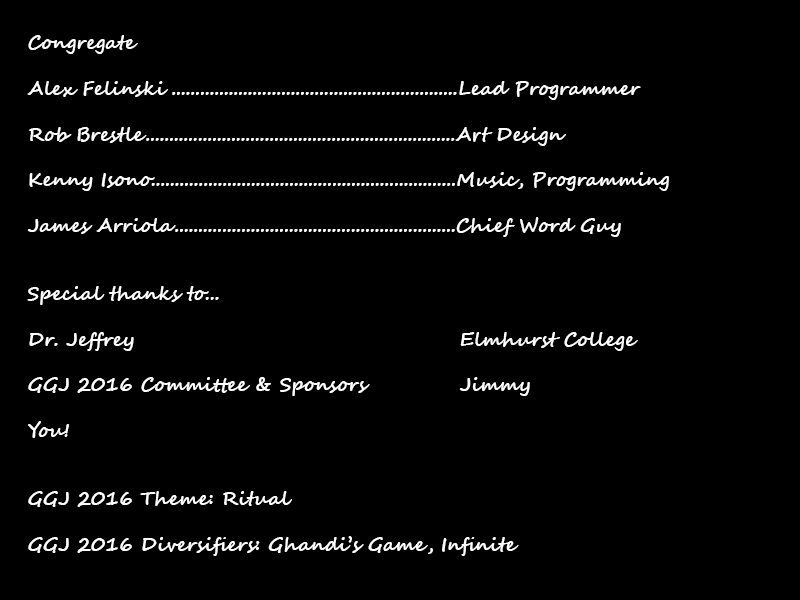
<style>
.page{position:relative;width:800px;height:600px;background:#000000}
.page>*{position:absolute;margin:0}
.t1{font:19px "SegoeScript-Bold";color:#ffffff}
</style>
<div class="page">
<p class="t1" style="left:27px;top:35px;width:642px;height:521px">Congregate<br><br>Alex Felinski ............................................................Lead Programmer<br><br>Rob Brestle.................................................................Art Design<br><br>Kenny Isono................................................................Music, Programming<br><br>James Arriola...........................................................Chief Word Guy<br><br><br>Special thanks to...<br><br>Dr. Jeffrey          Elmhurst College<br><br>GGJ 2016 Committee &amp; Sponsors   Jimmy<br><br>You!<br><br><br>GGJ 2016 Theme: Ritual<br><br>GGJ 2016 Diversifiers: Ghandi’s Game, Infinite</p>
</div>
